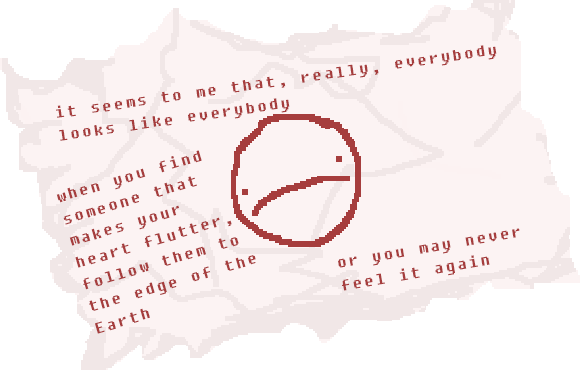
<style>
.page{position:relative;width:580px;height:370px;background:#fcf3f3}
.page>*{position:absolute;margin:0}
.t1{font:19px "FixedsysExcelsiorIIIb";letter-spacing:0.121em;color:#a63d3d}
</style>
<div class="page">
<p class="t1" style="left:56px;top:45px;width:441px;height:96px;rotate:-8deg">it seems to me that, really, everybody looks like everybody</p>
<p class="t1" style="left:56px;top:150px;width:200px;height:184px;rotate:-16deg">when you find someone that makes your heart flutter, follow them to the edge of the Earth</p>
<p class="t1" style="left:338px;top:228px;width:182px;height:63px;rotate:-10deg">or you may never feel it again</p>
</div>
